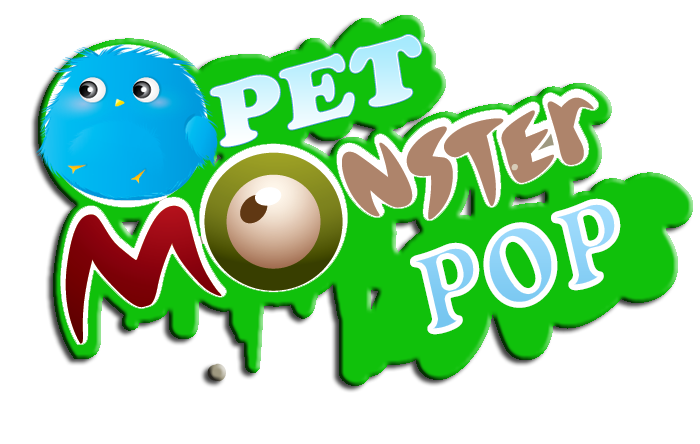
<style>
.page{position:relative;width:700px;height:444px;background:#ffffff}
.page>*{position:absolute;margin:0}
.t1{font:86.1px "CooperBlackStd";scale:1.16 1}
.t2{font:115.2px "CooperBlackStd";scale:0.84 1}
</style>
<div class="page">
<p class="t1" style="left:210px;top:35px;width:212px;height:112px;rotate:-15deg">PET</p>
<p class="t2" style="left:410px;top:198px;width:211px;height:137px;rotate:-17deg">POP</p>
</div>
